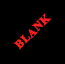
<style>
.page{position:relative;width:65px;height:64px;background:#000000}
.page>*{position:absolute;margin:0}
.t1{font:11.3px "TimesNewRomanPS-BoldMT";color:#fb2021;text-transform:uppercase;font-weight:bold}
</style>
<div class="page">
<p class="t1" style="left:14px;top:13px;width:37px;height:37px;rotate:-44deg">blank</p>
</div>
